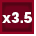
<style>
.page{position:relative;width:36px;height:36px;background:#70021d}
.page>*{position:absolute;margin:0}
.t1{font:14px "AvantGarde-Bold";color:#ffffff}
</style>
<div class="page">
<p class="t1" style="left:2px;top:12px;width:30px;height:11px">x3.5</p>
</div>
